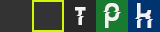
<style>
.page{position:relative;width:160px;height:32px;background:#333333}
.page>*{position:absolute;margin:0}
.t1{font:36px "ElectricShocker";color:#f4f1f2}
</style>
<div class="page">
<p class="t1" style="left:103px;top:3px;width:18px;height:25px">p</p>
<p class="t1" style="left:135px;top:3px;width:18px;height:25px">k</p>
<p class="t1" style="left:75px;top:7px;width:11px;height:18px">t</p>
</div>
